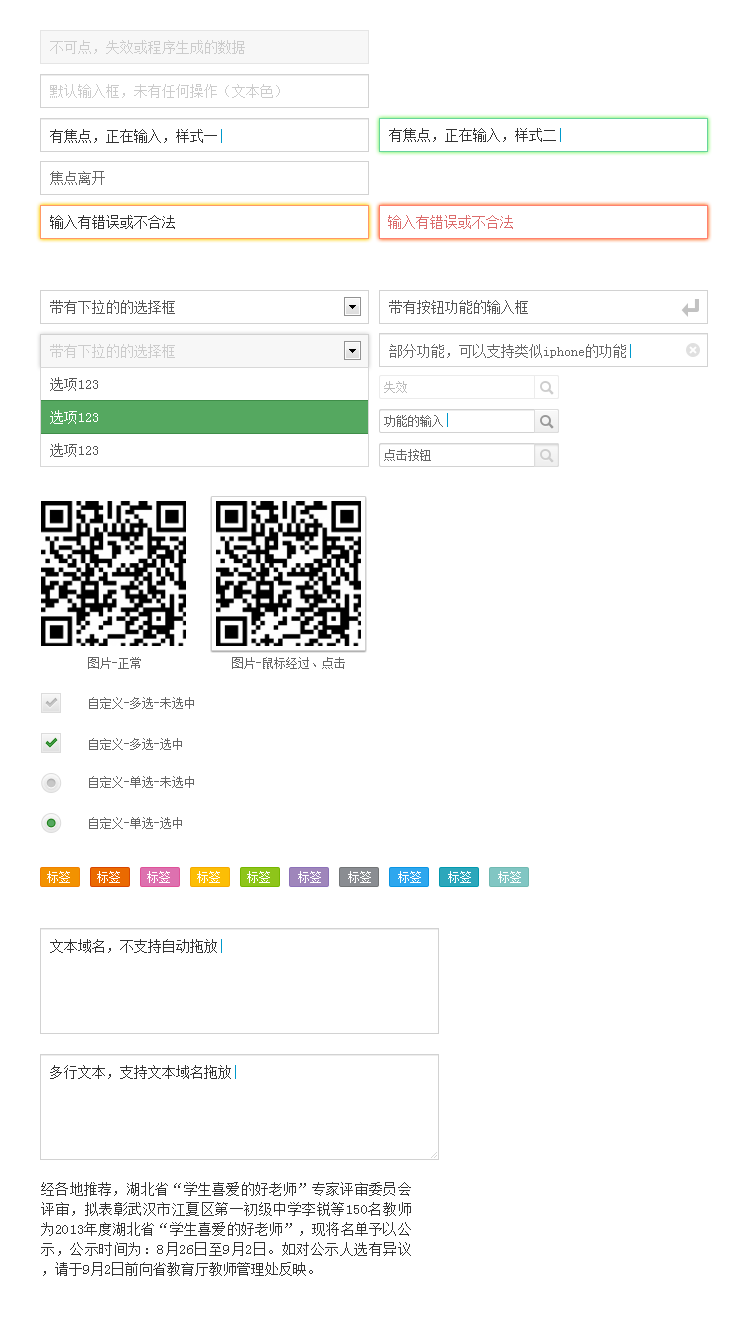
<style>
.page{position:relative;width:747px;height:1334px;background:#ffffff}
.page>*{position:absolute;margin:0}
.t1{font:14px "SimSun";color:#cccccc}
.t2{font:14px "SimSun";color:#333333}
.t3{font:14px "SimSun";color:#0099cc}
.t4{font:14px "SimSun";color:#666666}
.t5{font:14px "SimSun";color:#dc6c6c}
.t6{font:14px "SimSun";color:#555555}
.t7{font:12px "SimSun";color:#bbbbbb}
.t8{font:14px "SimSun";color:#ffffff}
.t9{font:12px "SimSun";color:#666666}
.t10{font:12px "SimSun";color:#ffffff}
.t11{font:14px/20px "SimSun";color:#333333}
</style>
<div class="page">
<p class="t1" style="left:50px;top:40px;width:195px;height:14px">不可点，失效或程序生成的数据</p>
<p class="t1" style="left:50px;top:84px;width:230px;height:14px">默认输入框，未有任何操作（文本色）</p>
<p class="t2" style="left:50px;top:129px;width:172px;height:14px">有焦点，正在输入，样式一<span class="t3">|</span></p>
<p class="t2" style="left:389px;top:128px;width:172px;height:14px">有焦点，正在输入，样式二<span class="t3">|</span></p>
<p class="t4" style="left:50px;top:171px;width:55px;height:14px">焦点离开</p>
<p class="t2" style="left:50px;top:215px;width:125px;height:14px">输入有错误或不合法</p>
<p class="t5" style="left:388px;top:215px;width:125px;height:14px">输入有错误或不合法</p>
<p class="t6" style="left:50px;top:300px;width:125px;height:14px">带有下拉的的选择框</p>
<p class="t6" style="left:389px;top:300px;width:139px;height:14px">带有按钮功能的输入框</p>
<p class="t1" style="left:50px;top:344px;width:125px;height:14px">带有下拉的的选择框</p>
<p class="t4" style="left:389px;top:344px;width:242px;height:14px">部分功能，可以支持类似iphone的功能<span class="t3">|</span></p>
<p class="t6" style="left:50px;top:377px;width:48px;height:14px">选项123</p>
<p class="t7" style="left:384px;top:381px;width:23px;height:12px">失效</p>
<p class="t8" style="left:50px;top:410px;width:48px;height:14px">选项123</p>
<p class="t9" style="left:384px;top:413px;width:64px;height:14px">功能的输入<span class="t3">|</span></p>
<p class="t6" style="left:50px;top:443px;width:48px;height:14px">选项123</p>
<p class="t9" style="left:384px;top:449px;width:47px;height:12px">点击按钮</p>
<p class="t9" style="left:88px;top:657px;width:53px;height:12px">图片-正常</p>
<p class="t9" style="left:232px;top:657px;width:113px;height:12px">图片-鼠标经过、点击</p>
<p class="t9" style="left:89px;top:697px;width:105px;height:12px">自定义-多选-未选中</p>
<p class="t9" style="left:89px;top:738px;width:93px;height:12px">自定义-多选-选中</p>
<p class="t9" style="left:89px;top:776px;width:105px;height:12px">自定义-单选-未选中</p>
<p class="t9" style="left:89px;top:817px;width:93px;height:12px">自定义-单选-选中</p>
<p class="t10" style="left:47px;top:871px;width:23px;height:12px">标签</p>
<p class="t10" style="left:97px;top:871px;width:23px;height:12px">标签</p>
<p class="t10" style="left:147px;top:871px;width:23px;height:12px">标签</p>
<p class="t10" style="left:197px;top:871px;width:23px;height:12px">标签</p>
<p class="t10" style="left:247px;top:871px;width:23px;height:12px">标签</p>
<p class="t10" style="left:298px;top:871px;width:23px;height:12px">标签</p>
<p class="t10" style="left:348px;top:871px;width:23px;height:12px">标签</p>
<p class="t10" style="left:398px;top:871px;width:23px;height:12px">标签</p>
<p class="t10" style="left:448px;top:871px;width:23px;height:12px">标签</p>
<p class="t10" style="left:498px;top:871px;width:23px;height:12px">标签</p>
<p class="t2" style="left:50px;top:939px;width:172px;height:14px">文本域名，不支持自动拖放<span class="t3">|</span></p>
<p class="t2" style="left:50px;top:1065px;width:186px;height:14px">多行文本，支持文本域名拖放<span class="t3">|</span></p>
<p class="t11" style="left:41px;top:1182px;width:370px;height:94px;text-align:justify">经各地推荐，湖北省“学生喜爱的好老师”专家评审委员会评审，拟表彰武汉市江夏区第一初级中学李锐等150名教师为2013年度湖北省“学生喜爱的好老师”，现将名单予以公示，公示时间为：8月26日至9月2日。如对公示人选有异议，请于9月2日前向省教育厅教师管理处反映。</p>
</div>
